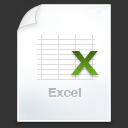
<style>
.page{position:relative;width:128px;height:128px;background:#333333}
.page>*{position:absolute;margin:0}
.t1{font:34.3px "HelveticaNeue-Bold";scale:1.2 1}
.t2{font:13px "HelveticaNeue-Bold";color:#cccccc}
</style>
<div class="page">
<p class="t1" style="left:70px;top:51px;width:29px;height:24px">X</p>
<p class="t2" style="left:48px;top:88px;width:33px;height:9px">Excel</p>
</div>
